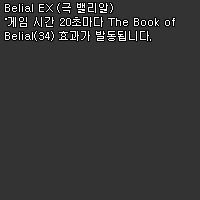
<style>
.page{position:relative;width:200px;height:200px;background:#333333}
.page>*{position:absolute;margin:0}
.t1{font:11px/14px "Dotum";color:#ffffff}
</style>
<div class="page">
<p class="t1" style="left:5px;top:3px;width:170px;height:38px">Belial EX (극 밸리알)<br>˚게임 시간 20초마다 The Book of<br>Belial(34) 효과가 발동됩니다.</p>
</div>
